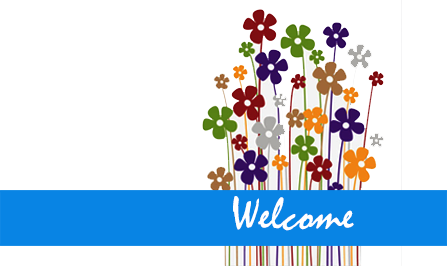
<style>
.page{position:relative;width:447px;height:267px;background:#ffffff}
.page>*{position:absolute;margin:0}
.t1{font:46.5px "Mistral";color:#ffffff}
</style>
<div class="page">
<p class="t1" style="left:233px;top:196px;width:121px;height:35px">Welcome</p>
</div>
